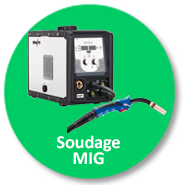
<style>
.page{position:relative;width:185px;height:185px;background:#00cc66}
.page>*{position:absolute;margin:0}
.t1{font:18px/16px "Calibri-Bold";color:#ffffff}
</style>
<div class="page">
<p class="t1" style="left:57px;top:135px;width:63px;height:30px;text-align:center">Soudage  <br>MIG</p>
</div>
